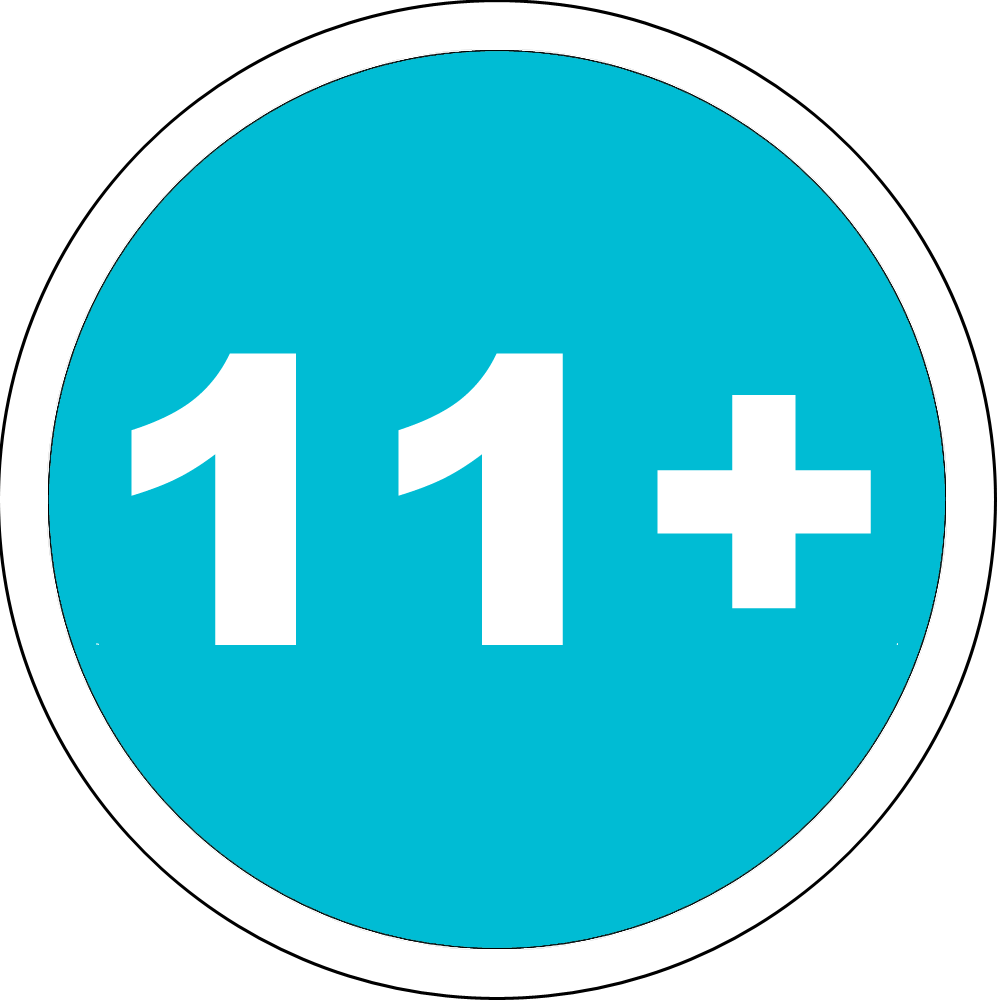
<style>
.page{position:relative;width:1000px;height:1000px;background:#00bcd4}
.page>*{position:absolute;margin:0}
.t1{font:400px "Arial-Black";color:#ffffff}
.t2{font:2.3px "ArialMT";color:#ffffff}
</style>
<div class="page">
<p class="t1" style="left:96px;top:353px;width:802px;height:292px"><span class="t2">Uu</span>11+<span class="t2">d</span></p>
</div>
